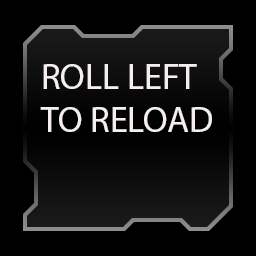
<style>
.page{position:relative;width:256px;height:256px;background:#000000}
.page>*{position:absolute;margin:0}
.t1{font:36px "MyriadPro-Regular";color:#f4eeee}
</style>
<div class="page">
<p class="t1" style="left:40px;top:64px;width:172px;height:68px">ROLL LEFT<br>TO RELOAD</p>
</div>
